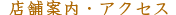
<style>
.page{position:relative;width:176px;height:15px;background:#ffffff}
.page>*{position:absolute;margin:0}
.t1{font:18px "UtrilloPro-M";color:#af6905}
</style>
<div class="page">
<p class="t1" style="left:9px;top:0px;width:159px;height:17px">店舗案内・アクセス</p>
</div>
